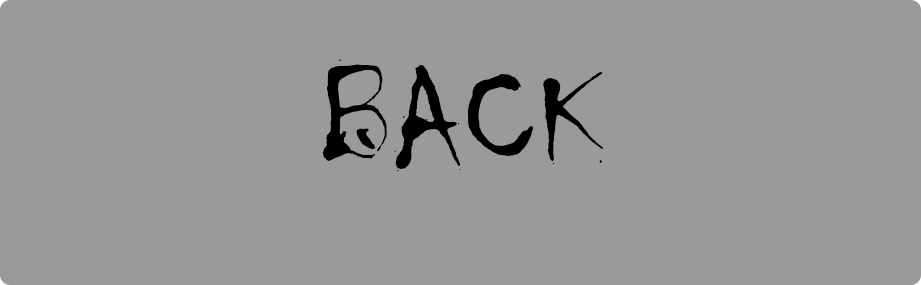
<style>
.page{position:relative;width:921px;height:285px;background:#9a9a9a}
.page>*{position:absolute;margin:0}
.t1{font:141.7px "Chiller-Regular";color:#000000}
</style>
<div class="page">
<p class="t1" style="left:322px;top:59px;width:282px;height:112px">BACK</p>
</div>
